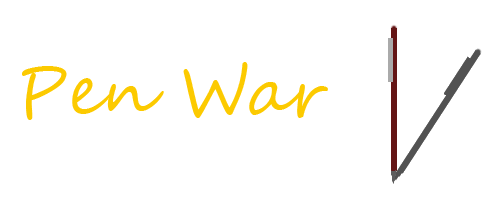
<style>
.page{position:relative;width:500px;height:200px;background:#ffffff}
.page>*{position:absolute;margin:0}
.t1{font:66.7px "SegoeScript";color:#fcca00}
</style>
<div class="page">
<p class="t1" style="left:22px;top:62px;width:306px;height:58px">Pen War</p>
</div>
